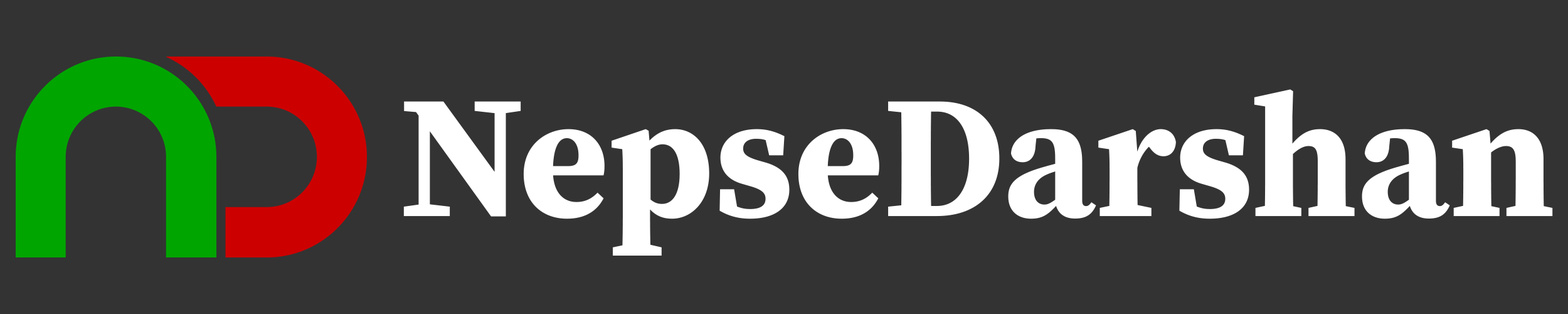
<style>
.page{position:relative;width:1568px;height:314px;background:#333333}
.page>*{position:absolute;margin:0}
.t1{font:174px "SourceSerifRoman-Bold";color:#ffffff}
</style>
<div class="page">
<p class="t1" style="left:403px;top:89px;width:1150px;height:166px">NepseDarshan</p>
</div>
